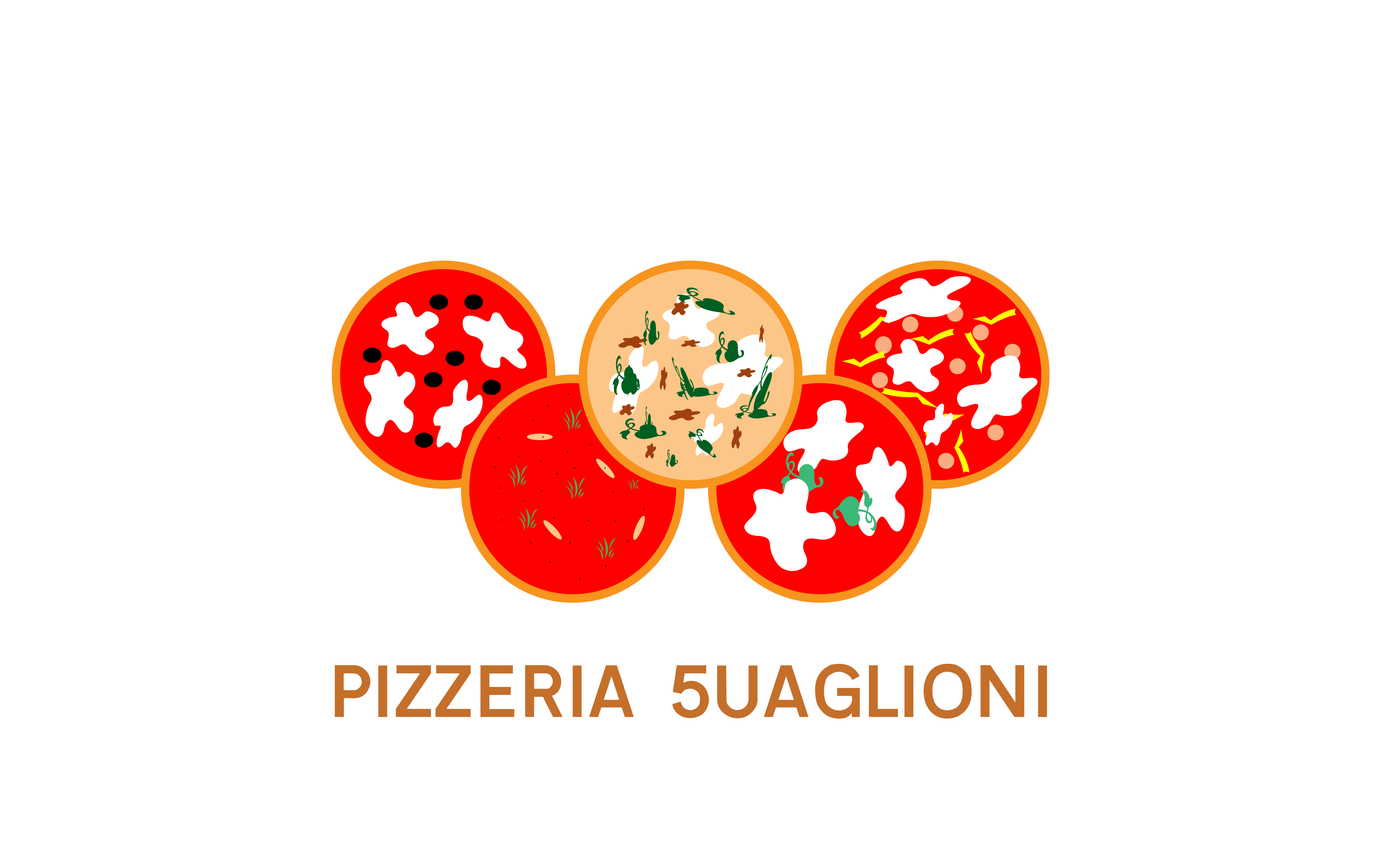
<style>
.page{position:relative;width:1381px;height:863px;background:#ffffff}
.page>*{position:absolute;margin:0}
.t1{font:69.1px "Transport-Medium";letter-spacing:-0.055em;color:#c46f2a}
</style>
<div class="page">
<p class="t1" style="left:335px;top:664px;width:712px;height:55px">PIZZERIA  5UAGLIONI</p>
</div>
